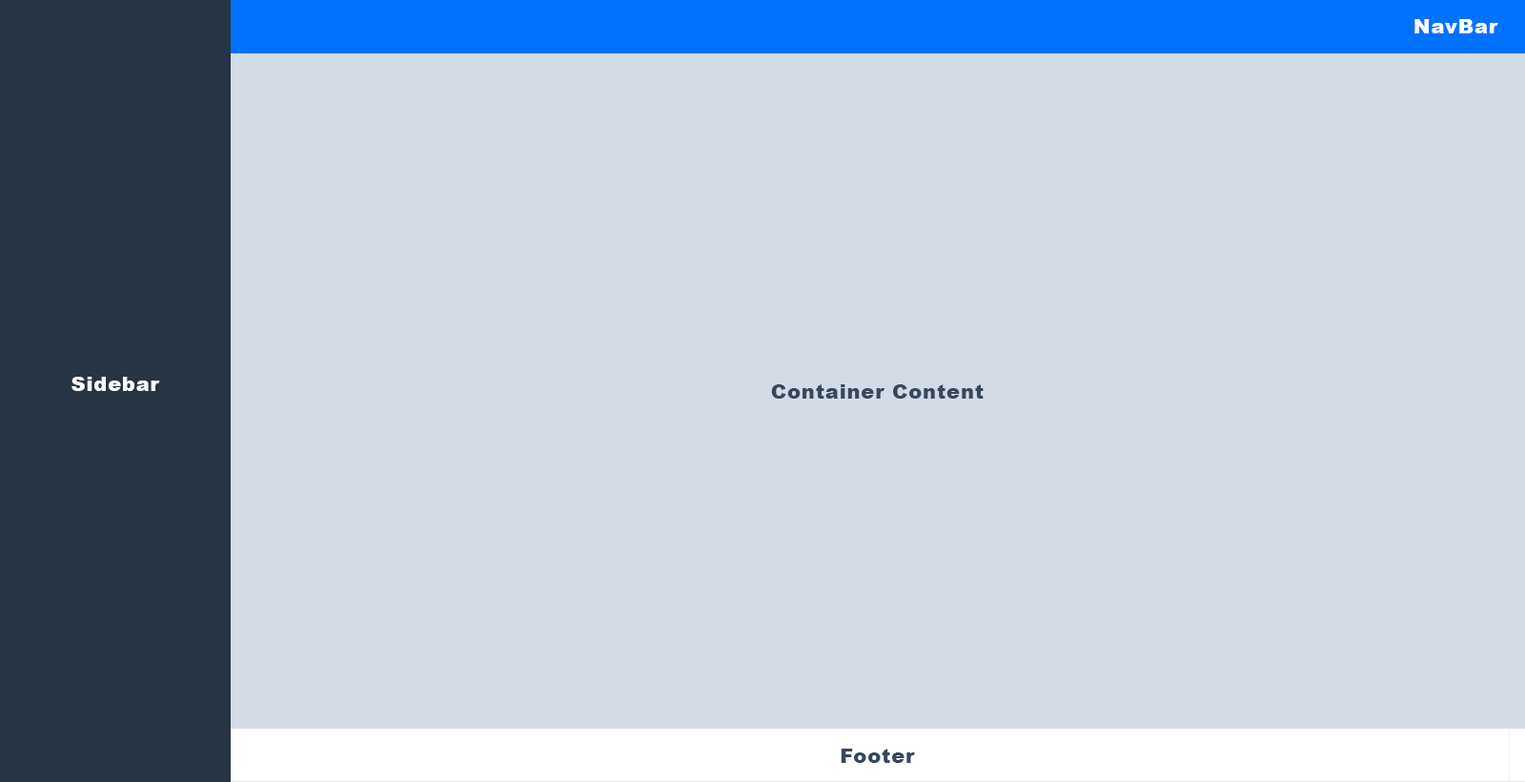
<style>
.page{position:relative;width:1525px;height:782px;background:#d3dce6}
.page>*{position:absolute;margin:0}
.t1{font:20.3px "Arial-Black";letter-spacing:0.03em;color:#ffffff}
.t2{font:20.3px "Arial-Black";letter-spacing:0.03em;color:#36485e}
</style>
<div class="page">
<p class="t1" style="left:1415px;top:19px;width:84px;height:14px">NavBar</p>
<p class="t1" style="left:72px;top:377px;width:88px;height:14px">Sidebar</p>
<p class="t2" style="left:771px;top:384px;width:213px;height:14px">Container Content</p>
<p class="t2" style="left:841px;top:748px;width:74px;height:15px">Footer</p>
</div>
